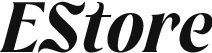
<style>
.page{position:relative;width:212px;height:53px;background:#ffffff}
.page>*{position:absolute;margin:0}
.t1{font:70px "Mileast-Italic";color:#111111}
</style>
<div class="page">
<p class="t1" style="left:0px;top:1px;width:213px;height:52px">EStore</p>
</div>
